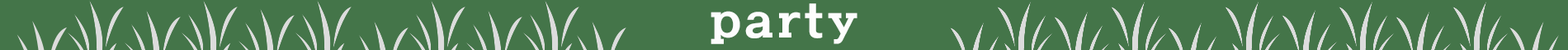
<style>
.page{position:relative;width:1568px;height:50px;background:#447549}
.page>*{position:absolute;margin:0}
.t1{font:45.4px "HaanSomangB";color:#fdfdfd}
</style>
<div class="page">
<p class="t1" style="left:711px;top:3px;width:146px;height:41px">party</p>
</div>
